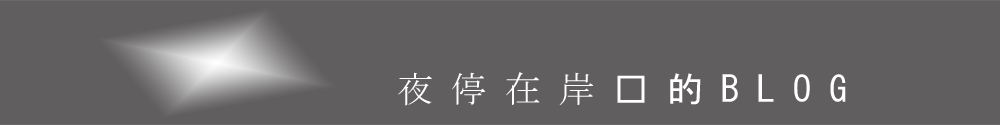
<style>
.page{position:relative;width:1000px;height:125px;background:#605e5e}
.page>*{position:absolute;margin:0}
.t1{font:36px "MS-Gothic";color:#ffffff}
.t2{font:36px "MS-Mincho";color:#ffffff}
</style>
<div class="page">
<p class="t1" style="left:398px;top:72px;width:448px;height:34px"><span class="t2">夜 停 在 岸 </span>边 的 B L O G</p>
</div>
